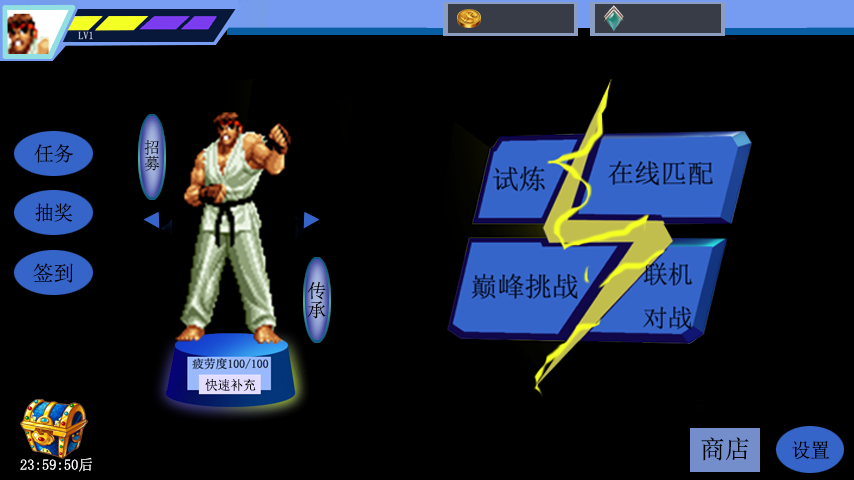
<style>
.page{position:relative;width:854px;height:480px;background:#000000}
.page>*{position:absolute;margin:0}
.t1{font:20px "SimSun";color:#000000}
.t2{font:16px "SimSun";color:#000000}
.t3{font:20px "SimSun";color:#000000;scale:0.95 1}
.t4{font:21px "SimSun";color:#000000}
.t5{font:19px "SimSun";color:#000000}
.t6{font:13px "SimSun";color:#000000}
.t7{font:25px "SimSun";color:#000000}
.t8{font:15px "SimSun";color:#fffefe}
</style>
<div class="page">
<p class="t1" style="left:34px;top:144px;width:39px;height:19px">任务</p>
<p class="t2" style="left:144px;top:140px;width:16px;height:31px">招募</p>
<p class="t3" style="left:35px;top:203px;width:37px;height:19px">抽奖</p>
<p class="t4" style="left:33px;top:263px;width:40px;height:20px">签到</p>
<p class="t5" style="left:307px;top:281px;width:19px;height:38px">传承</p>
<p class="t6" style="left:205px;top:378px;width:51px;height:13px">快速补充</p>
<p class="t7" style="left:701px;top:437px;width:48px;height:24px">商店</p>
<p class="t1" style="left:792px;top:441px;width:38px;height:19px">设置</p>
<p class="t8" style="left:20px;top:457px;width:72px;height:15px">23:59:50后</p>
</div>
